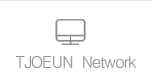
<style>
.page{position:relative;width:152px;height:80px;background:#ffffff}
.page>*{position:absolute;margin:0}
.t1{font:16px "Haansoft-Dotum";letter-spacing:-0.05em;color:#999999}
</style>
<div class="page">
<p class="t1" style="left:15px;top:56px;width:121px;height:12px">TJOEUN  Network</p>
</div>
